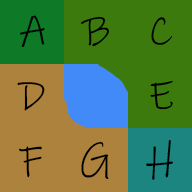
<style>
.page{position:relative;width:192px;height:192px;background:#3c7a0e}
.page>*{position:absolute;margin:0}
.t1{font:41.7px "InkFree";color:#000000}
</style>
<div class="page">
<p class="t1" style="left:20px;top:15px;width:25px;height:32px">A</p>
<p class="t1" style="left:81px;top:16px;width:28px;height:31px">B</p>
<p class="t1" style="left:151px;top:17px;width:21px;height:28px">C</p>
<p class="t1" style="left:17px;top:82px;width:28px;height:29px">D</p>
<p class="t1" style="left:150px;top:81px;width:23px;height:29px">E</p>
<p class="t1" style="left:19px;top:146px;width:23px;height:32px">F</p>
<p class="t1" style="left:81px;top:141px;width:28px;height:38px">G</p>
<p class="t1" style="left:146px;top:140px;width:27px;height:40px">H</p>
</div>
